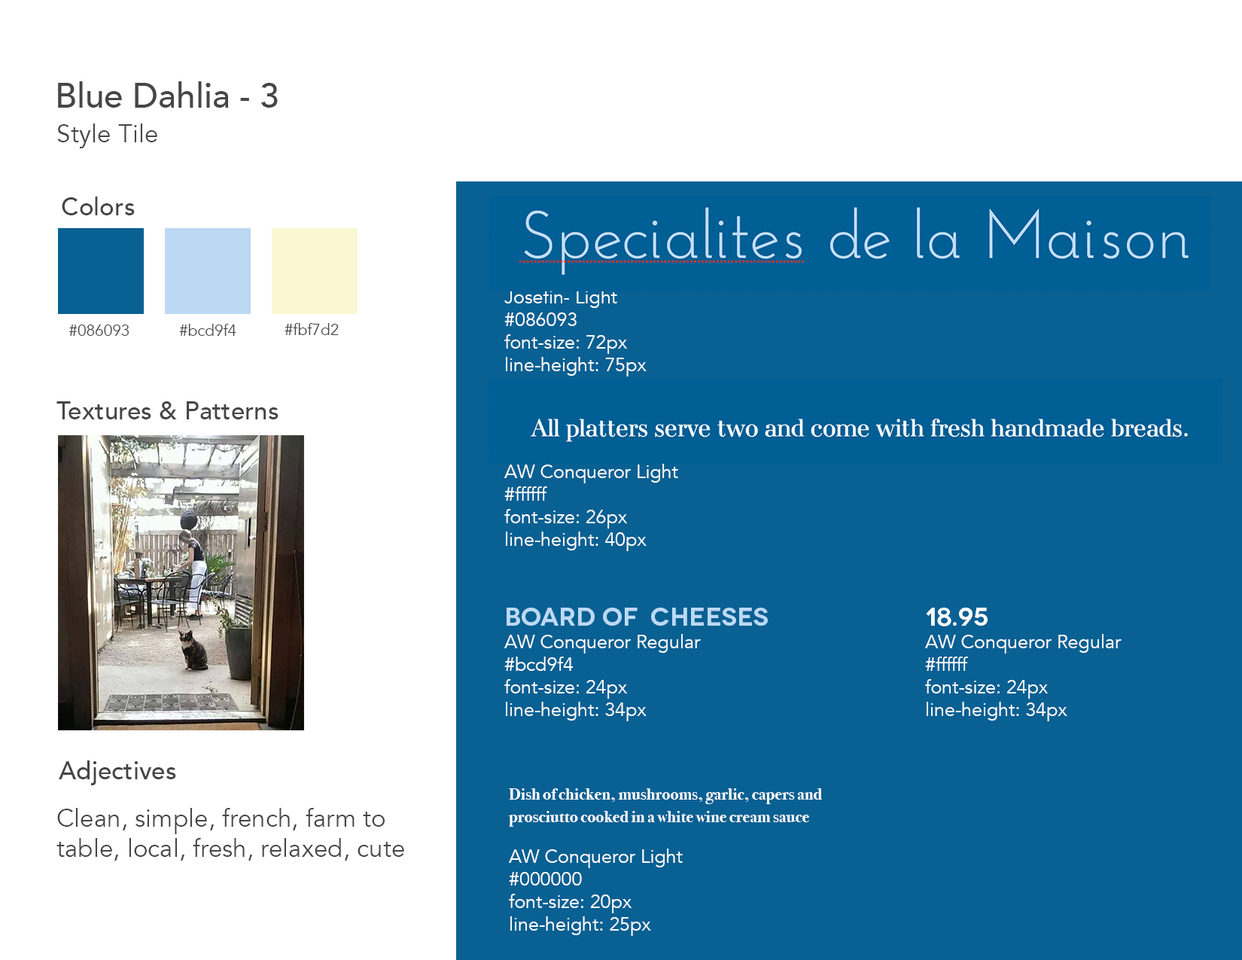
<style>
.page{position:relative;width:1242px;height:960px;background:#ffffff}
.page>*{position:absolute;margin:0}
.t1{font:34.5px "Avenir-Medium";color:#464646}
.t2{font:25.1px "Avenir-Book";color:#464646}
.t3{font:25.1px "Avenir-Medium";color:#464646}
.t4{font:18.8px "Avenir-Book";color:#ffffff}
.t5{font:15.7px "Avenir-Book";color:#464646}
.t6{font:25.6px "Novecentowide-DemiBold";color:#bcd9f4}
.t7{font:25.6px "Novecentowide-DemiBold";color:#ffffff}
.t8{font:16.6px/22.6px "BodoniSvtyTwoITCTT-Bold";color:#ffffff}
</style>
<div class="page">
<p class="t1" style="left:58px;top:81px;width:220px;height:27px">Blue Dahlia - 3</p>
<p class="t2" style="left:57px;top:123px;width:100px;height:25px">Style Tile</p>
<p class="t3" style="left:62px;top:196px;width:73px;height:19px">Colors</p>
<p class="t4" style="left:504px;top:289px;width:143px;height:87px">Josefin- Light<br>#086093<br>font-size: 72px<br>line-height: 75px</p>
<p class="t5" style="left:69px;top:324px;width:60px;height:12px">#086093</p>
<p class="t5" style="left:179px;top:324px;width:57px;height:12px">#bcd9f4</p>
<p class="t5" style="left:285px;top:323px;width:54px;height:12px">#fbf7d2</p>
<p class="t3" style="left:56px;top:401px;width:223px;height:18px">Textures &amp; Patterns</p>
<p class="t4" style="left:504px;top:464px;width:174px;height:87px">AW Conqueror Light<br>#ffffff<br>font-size: 26px<br>line-height: 40px</p>
<p class="t4" style="left:504px;top:608px;width:264px;height:113px"><span class="t6">Board of  Cheeses<br></span>AW Conqueror Regular<br>#bcd9f4<br>font-size: 24px<br>line-height: 34px</p>
<p class="t4" style="left:925px;top:608px;width:197px;height:113px"><span class="t7">18.95<br></span>AW Conqueror Regular<br>#ffffff<br>font-size: 24px<br>line-height: 34px</p>
<p class="t3" style="left:59px;top:760px;width:117px;height:25px">Adjectives</p>
<p class="t8" style="left:508px;top:788px;width:314px;height:148px">Dish of chicken, mushrooms, garlic, capers and  prosciutto cooked in a white wine cream sauce <br><br><span class="t4">AW Conqueror Light<br>#000000<br>font-size: 20px<br>line-height: 25px</span></p>
<p class="t2" style="left:56px;top:808px;width:348px;height:53px">Clean, simple, french, farm to table, local, fresh, relaxed, cute</p>
</div>
